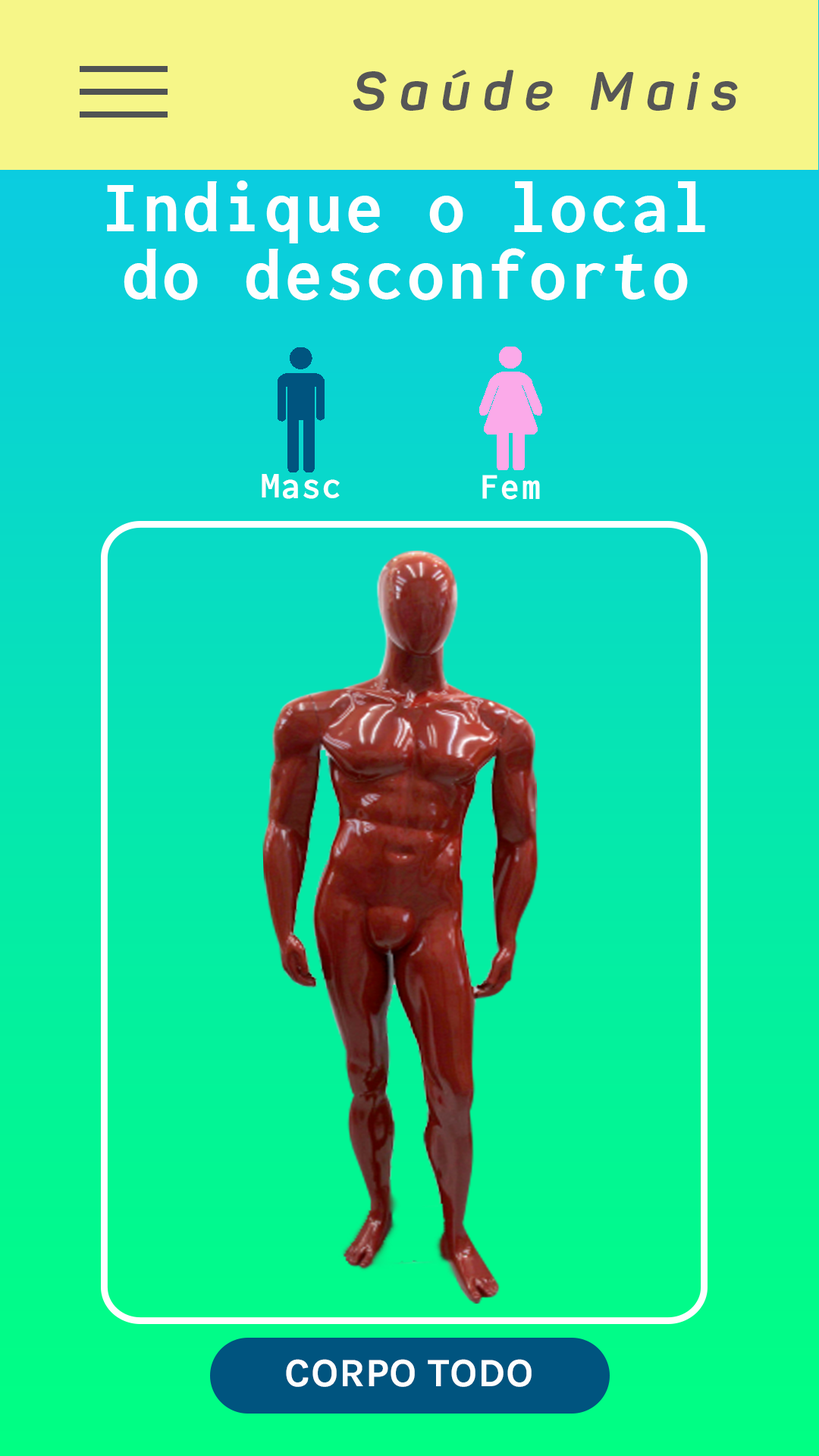
<style>
.page{position:relative;width:819px;height:1456px}
.page>*{position:absolute;margin:0}
.t1{font:53.9px "Panton-BoldItalic";letter-spacing:0.23em;color:#565656}
.t2{font:74.1px/67.4px "Inconsolata-Bold";letter-spacing:0.05em;color:#fefefe}
.t3{font:38px "Inconsolata-Bold";letter-spacing:0.05em;color:#fefefe}
.t4{font:40.4px "Karla-Bold";letter-spacing:0.01em;color:#fefefe}
</style>
<div class="page">
<p class="t1" style="left:353px;top:70px;width:385px;height:41px">Saúde Mais</p>
<p class="t2" style="left:107px;top:180px;width:598px;height:120px;text-align:center">Indique o local<br>do desconforto</p>
<p class="t3" style="left:262px;top:474px;width:78px;height:25px">Masc</p>
<p class="t4" style="left:286px;top:1359px;width:246px;height:28px">CORPO TODO</p>
</div>
